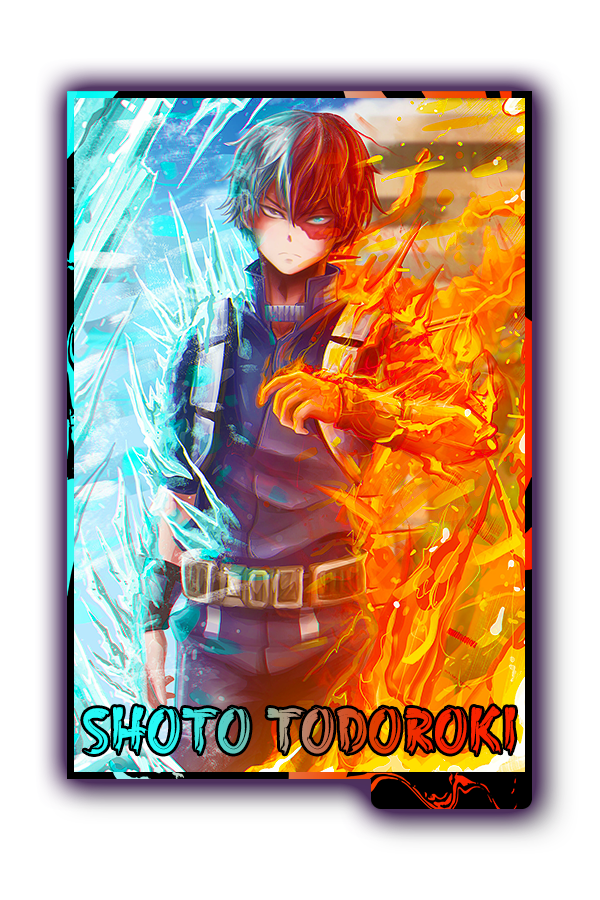
<style>
.page{position:relative;width:600px;height:900px;background:#ffffff}
.page>*{position:absolute;margin:0}
.t1{font:66.1px "aBarbequeGrill"}
</style>
<div class="page">
<p class="t1" style="left:83px;top:706px;width:432px;height:49px">Shoto Todoroki</p>
</div>
